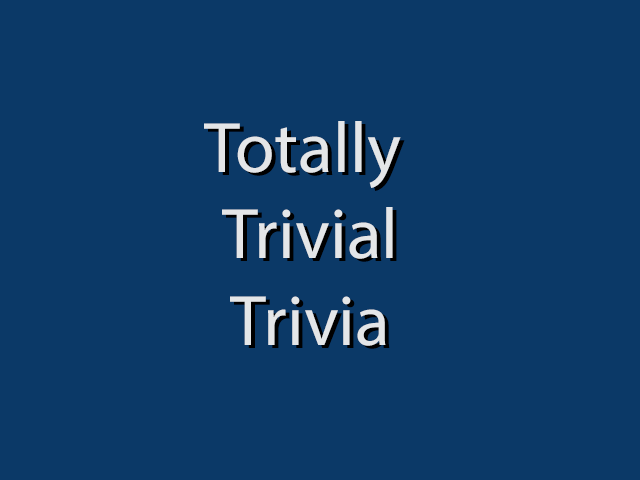
<style>
.page{position:relative;width:640px;height:480px;background:#0b3967}
.page>*{position:absolute;margin:0}
.t1{font:72px "MyriadPro-Regular";color:#e4e6e8}
</style>
<div class="page">
<p class="t1" style="left:204px;top:121px;width:197px;height:225px;text-align:center">Totally <br>Trivial<br>Trivia</p>
</div>
